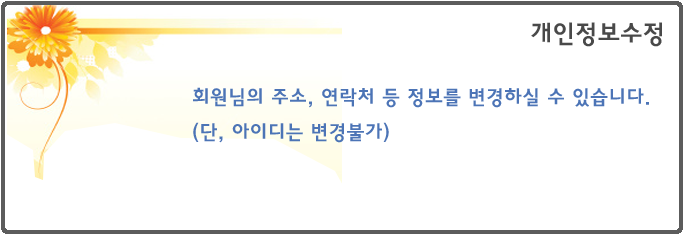
<style>
.page{position:relative;width:685px;height:235px;background:#ffffff}
.page>*{position:absolute;margin:0}
.t1{font:25px "HaanYGodic24";color:#494949}
.t2{font:20px "HaanYGodic24";color:#4c74b6}
</style>
<div class="page">
<p class="t1" style="left:531px;top:22px;width:131px;height:25px">개인정보수정</p>
<p class="t2" style="left:193px;top:87px;width:456px;height:56px">회원님의 주소, 연락처 등 정보를 변경하실 수 있습니다. <br>(단, 아이디는 변경불가)</p>
</div>
